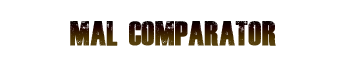
<style>
.page{position:relative;width:350px;height:82px;background:#ffffff}
.page>*{position:absolute;margin:0}
.t1{font:24px "DeadKansas"}
</style>
<div class="page">
<p class="t1" style="left:70px;top:21px;width:206px;height:25px">MAL COMPARATOR</p>
</div>
